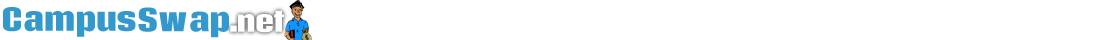
<style>
.page{position:relative;width:1100px;height:40px;background:#ffffff}
.page>*{position:absolute;margin:0}
.t1{font:30px "Coda-Heavy";letter-spacing:-0.05em;color:#3399cc}
.t2{font:27px "Coda-Heavy";letter-spacing:-0.05em;color:#ffffff}
</style>
<div class="page">
<p class="t1" style="left:3px;top:7px;width:133px;height:30px">Campus</p>
<p class="t1" style="left:138px;top:7px;width:91px;height:31px">Swap</p>
<p class="t2" style="left:230px;top:10px;width:54px;height:23px">.net</p>
</div>
